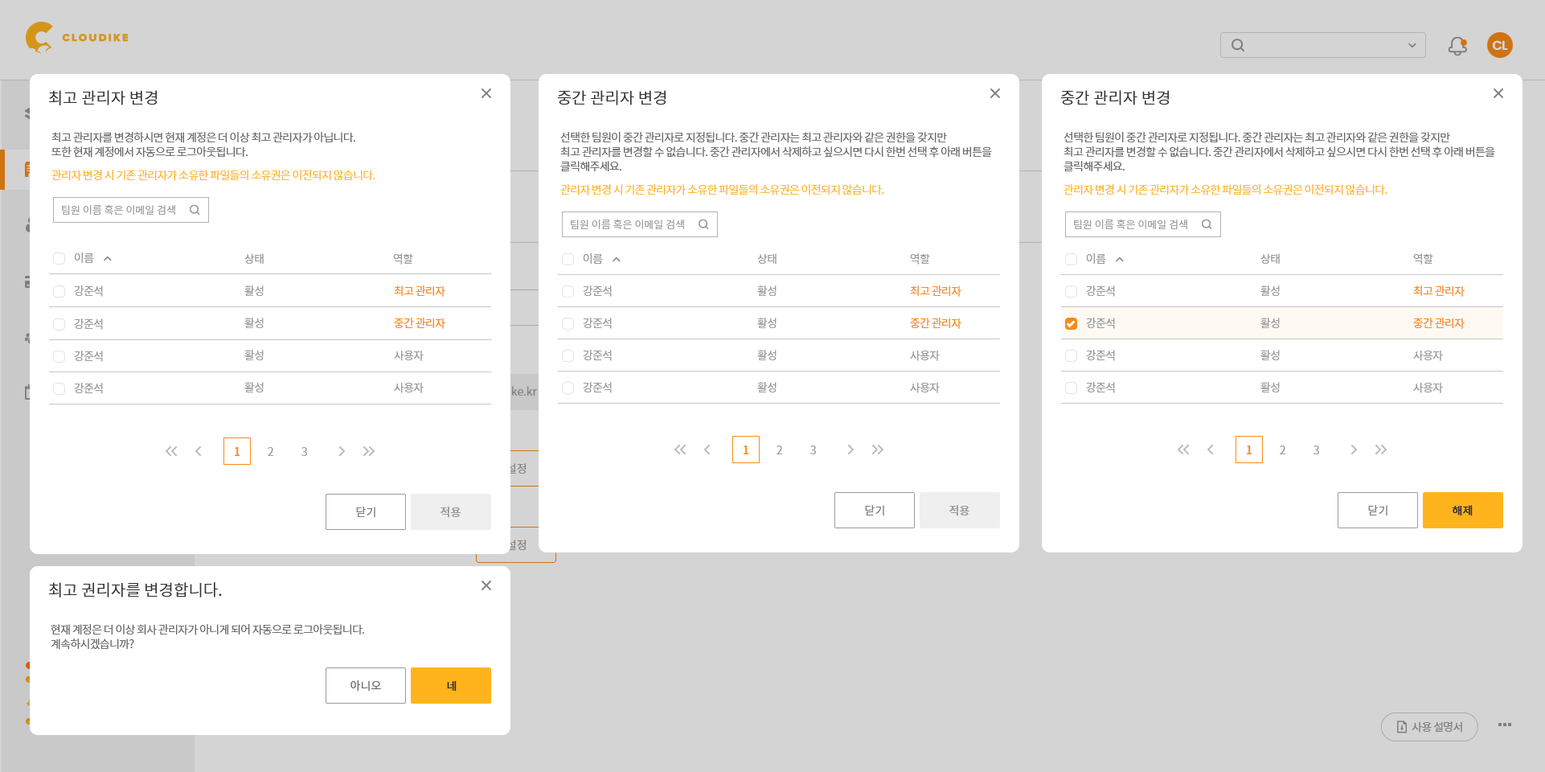
<style>
.page{position:relative;width:1545px;height:772px;background:#ffffff}
.page>*{position:absolute;margin:0}
.t1{font:12.9px "Poppins-SemiBold";letter-spacing:-0.05em;color:#d4d4d4}
.t2{font:16.1px "NotoSansCJKkr-DemiLight";color:#333333}
.t3{font:11.3px/14.5px "NotoSansCJKkr-DemiLight";letter-spacing:-0.05em;color:#666666}
.t4{font:11.3px "NotoSansCJKkr-DemiLight";letter-spacing:-0.05em;color:#ffb41d}
.t5{font:10.5px "NotoSansCJKkr-DemiLight";color:#999999}
.t6{font:11.3px "NotoSansCJKkr-Regular";letter-spacing:-0.05em;color:#999999}
.t7{font:11.3px "NotoSansCJKkr-Regular";letter-spacing:-0.05em;color:#f98a17}
.t8{font:11.3px "NotoSansCJKkr-Medium";color:#f98a17}
.t9{font:11.3px "NotoSansCJKkr-DemiLight";color:#999999}
.t10{font:11.3px "NotoSansCJKkr-DemiLight";color:#7f7f7f}
.t11{font:11.3px "NotoSansCJKkr-Regular";color:#7b7b7b}
.t12{font:11.3px "NotoSansCJKkr-Medium";color:#999999}
.t13{font:11.3px "NotoSansCJKkr-Medium";color:#333333}
.t14{font:11.3px "NotoSansCJKkr-Regular";color:#666666}
.t15{font:11.3px "NotoSansCJKkr-Regular";letter-spacing:-0.05em;color:#7f7f7f}
</style>
<div class="page">
<p class="t1" style="left:1492px;top:40px;width:16px;height:10px">CL</p>
<p class="t2" style="left:49px;top:90px;width:109px;height:15px">최고 관리자 변경</p>
<p class="t2" style="left:557px;top:90px;width:109px;height:15px">중간 관리자 변경</p>
<p class="t2" style="left:1060px;top:90px;width:110px;height:15px">중간 관리자 변경</p>
<p class="t3" style="left:51px;top:132px;width:304px;height:26px">최고 관리자를 변경하시면 현재 계정은 더 이상 최고 관리자가 아닙니다. <br>또한 현재 계정에서 자동으로 로그아웃됩니다.</p>
<p class="t3" style="left:560px;top:132px;width:432px;height:40px">선택한 팀원이 중간 관리자로 지정됩니다. 중간 관리자는 최고 관리자와 같은 권한을 갖지만 <br>최고 관리자를 변경할 수 없습니다. 중간 관리자에서 삭제하고 싶으시면 다시 한번 선택 후 아래 버튼을 <br>클릭해주세요.</p>
<p class="t3" style="left:1064px;top:132px;width:431px;height:40px">선택한 팀원이 중간 관리자로 지정됩니다. 중간 관리자는 최고 관리자와 같은 권한을 갖지만 <br>최고 관리자를 변경할 수 없습니다. 중간 관리자에서 삭제하고 싶으시면 다시 한번 선택 후 아래 버튼을 <br>클릭해주세요.</p>
<p class="t4" style="left:51px;top:170px;width:324px;height:11px">관리자 변경 시 기존 관리자가 소유한 파일들의 소유권은 이전되지 않습니다.</p>
<p class="t4" style="left:560px;top:184px;width:324px;height:11px">관리자 변경 시 기존 관리자가 소유한 파일들의 소유권은 이전되지 않습니다.</p>
<p class="t4" style="left:1064px;top:184px;width:324px;height:11px">관리자 변경 시 기존 관리자가 소유한 파일들의 소유권은 이전되지 않습니다.</p>
<p class="t5" style="left:62px;top:205px;width:113px;height:10px">팀원 이름 혹은 이메일 검색</p>
<p class="t5" style="left:571px;top:219px;width:113px;height:11px">팀원 이름 혹은 이메일 검색</p>
<p class="t5" style="left:1074px;top:219px;width:113px;height:11px">팀원 이름 혹은 이메일 검색</p>
<p class="t6" style="left:74px;top:252px;width:20px;height:11px">이름</p>
<p class="t6" style="left:244px;top:253px;width:20px;height:11px">상태</p>
<p class="t6" style="left:393px;top:253px;width:20px;height:11px">역할</p>
<p class="t6" style="left:583px;top:253px;width:20px;height:11px">이름</p>
<p class="t6" style="left:757px;top:253px;width:20px;height:11px">상태</p>
<p class="t6" style="left:910px;top:253px;width:20px;height:11px">역할</p>
<p class="t6" style="left:1086px;top:253px;width:20px;height:11px">이름</p>
<p class="t6" style="left:1261px;top:253px;width:19px;height:11px">상태</p>
<p class="t6" style="left:1413px;top:253px;width:20px;height:11px">역할</p>
<p class="t6" style="left:74px;top:285px;width:29px;height:12px">강준석</p>
<p class="t6" style="left:244px;top:285px;width:20px;height:11px">활성</p>
<p class="t7" style="left:394px;top:285px;width:51px;height:12px">최고 관리자</p>
<p class="t6" style="left:583px;top:285px;width:29px;height:12px">강준석</p>
<p class="t6" style="left:757px;top:285px;width:20px;height:11px">활성</p>
<p class="t7" style="left:910px;top:285px;width:51px;height:12px">최고 관리자</p>
<p class="t6" style="left:1086px;top:285px;width:29px;height:12px">강준석</p>
<p class="t6" style="left:1261px;top:285px;width:19px;height:11px">활성</p>
<p class="t7" style="left:1413px;top:285px;width:52px;height:12px">최고 관리자</p>
<p class="t6" style="left:244px;top:318px;width:20px;height:10px">활성</p>
<p class="t7" style="left:394px;top:318px;width:51px;height:11px">중간 관리자</p>
<p class="t6" style="left:583px;top:318px;width:29px;height:11px">강준석</p>
<p class="t6" style="left:757px;top:318px;width:20px;height:10px">활성</p>
<p class="t7" style="left:910px;top:318px;width:51px;height:11px">중간 관리자</p>
<p class="t6" style="left:1086px;top:318px;width:29px;height:11px">강준석</p>
<p class="t6" style="left:1261px;top:318px;width:19px;height:10px">활성</p>
<p class="t7" style="left:1413px;top:318px;width:52px;height:11px">중간 관리자</p>
<p class="t6" style="left:74px;top:318px;width:29px;height:12px">강준석</p>
<p class="t6" style="left:74px;top:351px;width:29px;height:11px">강준석</p>
<p class="t6" style="left:244px;top:350px;width:20px;height:10px">활성</p>
<p class="t6" style="left:394px;top:350px;width:30px;height:11px">사용자</p>
<p class="t6" style="left:583px;top:350px;width:29px;height:11px">강준석</p>
<p class="t6" style="left:757px;top:350px;width:20px;height:10px">활성</p>
<p class="t6" style="left:910px;top:350px;width:30px;height:11px">사용자</p>
<p class="t6" style="left:1086px;top:350px;width:29px;height:11px">강준석</p>
<p class="t6" style="left:1261px;top:350px;width:19px;height:10px">활성</p>
<p class="t6" style="left:1413px;top:350px;width:30px;height:11px">사용자</p>
<p class="t6" style="left:74px;top:383px;width:29px;height:11px">강준석</p>
<p class="t6" style="left:244px;top:382px;width:20px;height:10px">활성</p>
<p class="t6" style="left:394px;top:382px;width:30px;height:11px">사용자</p>
<p class="t6" style="left:583px;top:382px;width:29px;height:11px">강준석</p>
<p class="t6" style="left:757px;top:382px;width:20px;height:10px">활성</p>
<p class="t6" style="left:910px;top:382px;width:30px;height:11px">사용자</p>
<p class="t6" style="left:1086px;top:382px;width:29px;height:11px">강준석</p>
<p class="t6" style="left:1261px;top:382px;width:19px;height:10px">활성</p>
<p class="t6" style="left:1413px;top:382px;width:30px;height:11px">사용자</p>
<p class="t8" style="left:235px;top:447px;width:5px;height:9px">1</p>
<p class="t9" style="left:268px;top:447px;width:5px;height:9px">2</p>
<p class="t9" style="left:301px;top:447px;width:6px;height:9px">3</p>
<p class="t8" style="left:744px;top:445px;width:5px;height:9px">1</p>
<p class="t9" style="left:777px;top:445px;width:5px;height:9px">2</p>
<p class="t9" style="left:810px;top:445px;width:6px;height:9px">3</p>
<p class="t8" style="left:1247px;top:445px;width:5px;height:9px">1</p>
<p class="t9" style="left:1280px;top:445px;width:5px;height:9px">2</p>
<p class="t9" style="left:1314px;top:445px;width:5px;height:9px">3</p>
<p class="t10" style="left:506px;top:463px;width:20px;height:10px">설정</p>
<p class="t11" style="left:356px;top:506px;width:19px;height:12px">닫기</p>
<p class="t12" style="left:441px;top:506px;width:20px;height:12px">적용</p>
<p class="t11" style="left:865px;top:505px;width:19px;height:11px">닫기</p>
<p class="t12" style="left:949px;top:505px;width:21px;height:11px">적용</p>
<p class="t11" style="left:1368px;top:505px;width:20px;height:11px">닫기</p>
<p class="t13" style="left:1453px;top:505px;width:20px;height:10px">해제</p>
<p class="t10" style="left:506px;top:539px;width:20px;height:11px">설정</p>
<p class="t2" style="left:49px;top:582px;width:173px;height:15px">최고 권리자를 변경합니다.</p>
<p class="t3" style="left:51px;top:624px;width:313px;height:26px">현재 계정은 더 이상 회사 관리자가 아니게 되어 자동으로 로그아웃됩니다.<br>계속하시겠습니까?</p>
<p class="t14" style="left:351px;top:680px;width:30px;height:11px">아니오</p>
<p class="t13" style="left:447px;top:680px;width:10px;height:11px">네</p>
<p class="t15" style="left:1412px;top:721px;width:50px;height:11px">사용 설명서</p>
</div>
